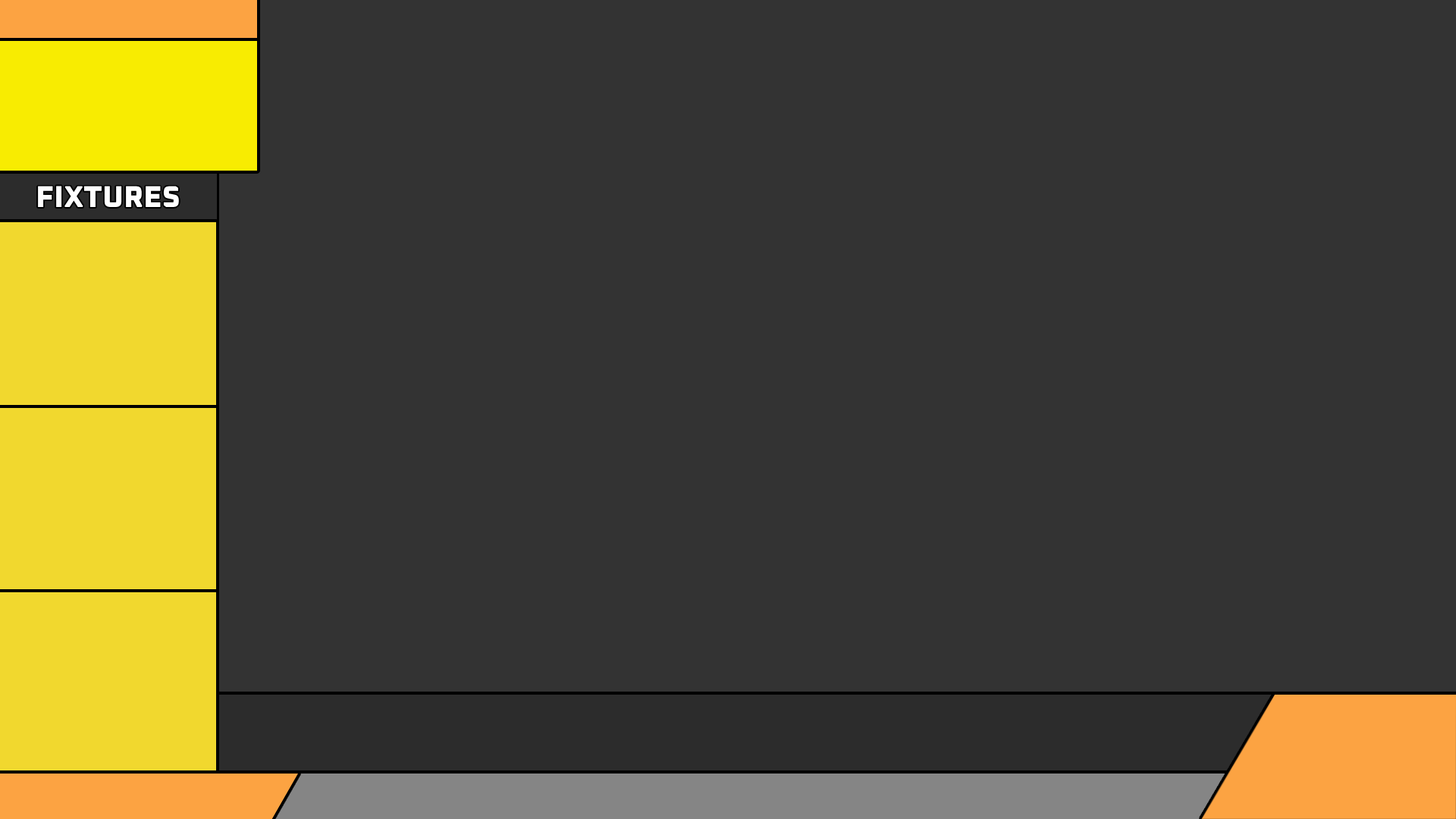
<style>
.page{position:relative;width:1456px;height:819px;background:#333333}
.page>*{position:absolute;margin:0}
.t1{font:30.3px "OxaniumRoman-ExtraBold";color:#ffffff}
</style>
<div class="page">
<p class="t1" style="left:38px;top:186px;width:141px;height:21px">FIXTURES</p>
</div>
